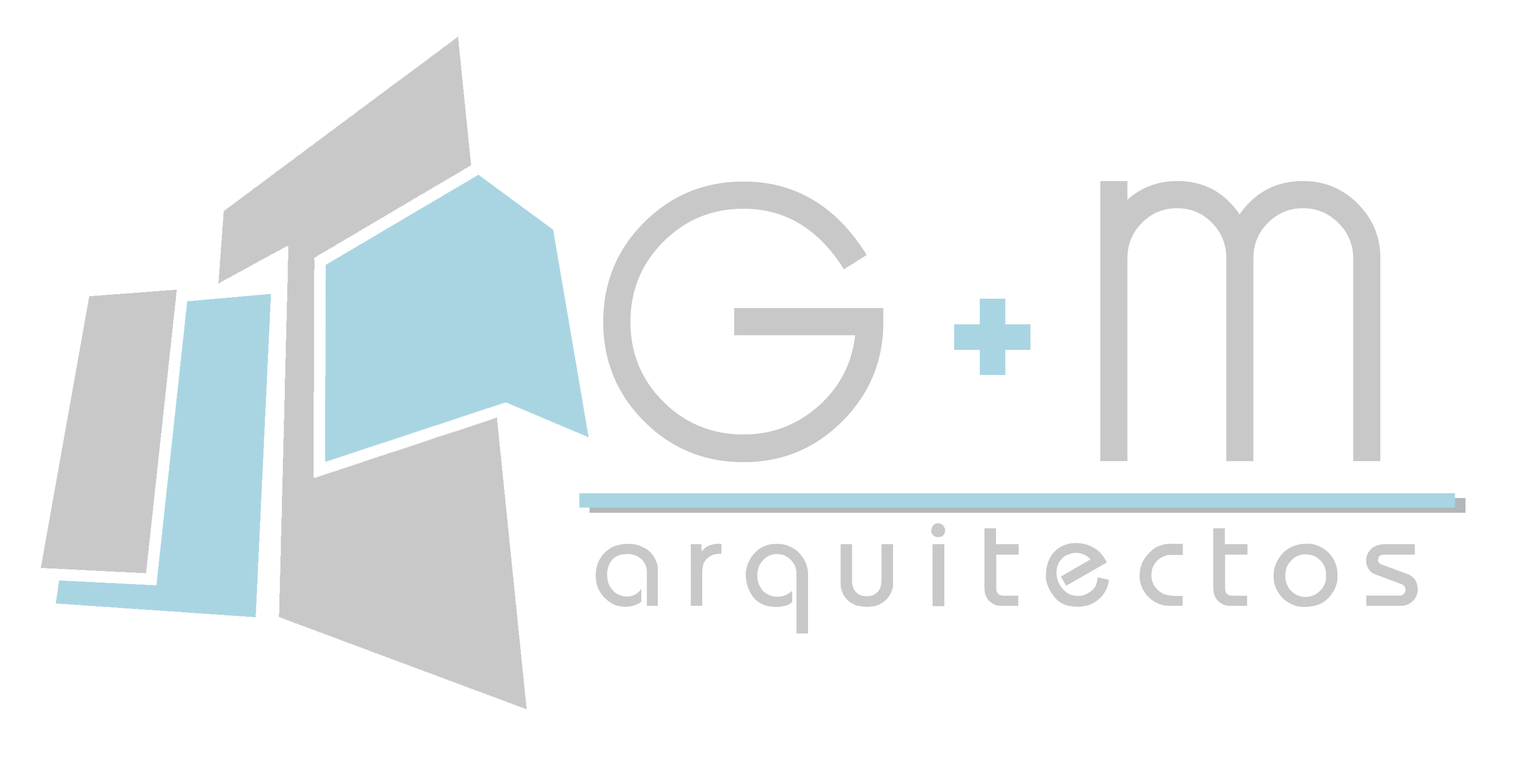
<style>
.page{position:relative;width:1526px;height:781px;background:#ffffff}
.page>*{position:absolute;margin:0}
.t1{font:492.2px "KravitzThermal";color:#c8c8c8}
.t2{font:262.9px "LadyIce-Bold";letter-spacing:0.15em;color:#a9d5e3}
.t3{font:132.9px "Opal";letter-spacing:0.15em;color:#c8c8c8}
</style>
<div class="page">
<p class="t1" style="left:603px;top:181px;width:778px;height:281px">g  m</p>
<p class="t2" style="left:954px;top:299px;width:77px;height:76px">+</p>
<p class="t3" style="left:596px;top:523px;width:822px;height:111px">arquitectos</p>
</div>
